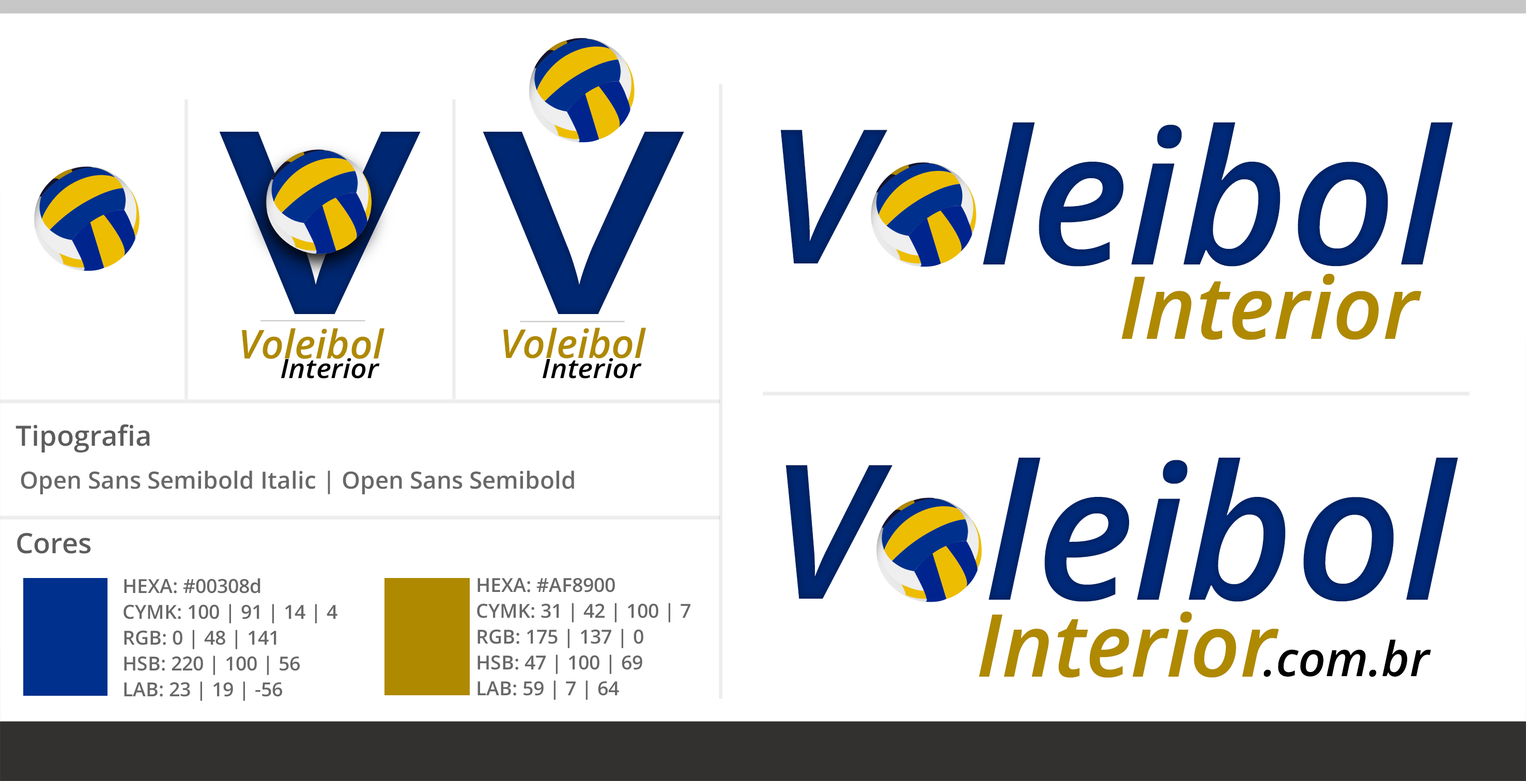
<style>
.page{position:relative;width:1526px;height:781px;background:#ffffff}
.page>*{position:absolute;margin:0}
.t1{font:187px "OpenSans-SemiboldItalic";color:#002774}
.t2{font:255.5px "OpenSans-Semibold";scale:1.26 1}
.t3{font:255.5px "OpenSans-Semibold";color:#002772;scale:1.26 1}
.t4{font:187px "OpenSans-SemiboldItalic";color:#00256e}
.t5{font:87.1px "OpenSans-SemiboldItalic";color:#af8900}
.t6{font:39.8px "OpenSans-SemiboldItalic";color:#af8900}
.t7{font:26.8px "OpenSans-SemiboldItalic";color:#000000;scale:1.07 1}
.t8{font:28px "OpenSans-Semibold";color:#5d5c5c}
.t9{font:23.7px "OpenSans-Semibold";color:#686868}
.t10{font:19.4px/25.8px "OpenSans-Semibold";color:#686868}
.t11{font:48px "OpenSans-SemiboldItalic";color:#000000}
</style>
<div class="page">
<p class="t1" style="left:983px;top:122px;width:470px;height:145px">leibol</p>
<p class="t2" style="left:219px;top:132px;width:202px;height:182px">V</p>
<p class="t3" style="left:483px;top:132px;width:201px;height:182px">V</p>
<p class="t4" style="left:780px;top:130px;width:107px;height:134px">V</p>
<p class="t5" style="left:1121px;top:274px;width:301px;height:66px">Interior</p>
<p class="t6" style="left:242px;top:328px;width:142px;height:31px">Voleibol</p>
<p class="t6" style="left:503px;top:328px;width:143px;height:31px">Voleibol</p>
<p class="t7" style="left:281px;top:358px;width:99px;height:21px">Interior</p>
<p class="t7" style="left:543px;top:358px;width:99px;height:21px">Interior</p>
<p class="t8" style="left:16px;top:424px;width:134px;height:29px">Tipografia</p>
<p class="t1" style="left:989px;top:458px;width:469px;height:144px">leibol</p>
<p class="t9" style="left:21px;top:471px;width:553px;height:24px">Open Sans Semibold Italic | Open Sans Semibold</p>
<p class="t4" style="left:786px;top:465px;width:106px;height:134px">V</p>
<p class="t8" style="left:17px;top:533px;width:74px;height:21px">Cores</p>
<p class="t10" style="left:124px;top:578px;width:213px;height:123px">HEXA: #00308d<br>CYMK: 100 | 91 | 14 | 4<br>RGB: 0 | 48 | 141<br>HSB: 220 | 100 | 56<br>LAB: 23 | 19 | -56</p>
<p class="t10" style="left:477px;top:578px;width:213px;height:122px">HEXA: #AF8900<br>CYMK: 31 | 42 | 100 | 7<br>RGB: 175 | 137 | 0<br>HSB: 47 | 100 | 69<br>LAB: 59 | 7 | 64</p>
<p class="t5" style="left:979px;top:612px;width:300px;height:66px">Interior</p>
<p class="t11" style="left:1264px;top:640px;width:167px;height:38px">.com.br</p>
</div>
